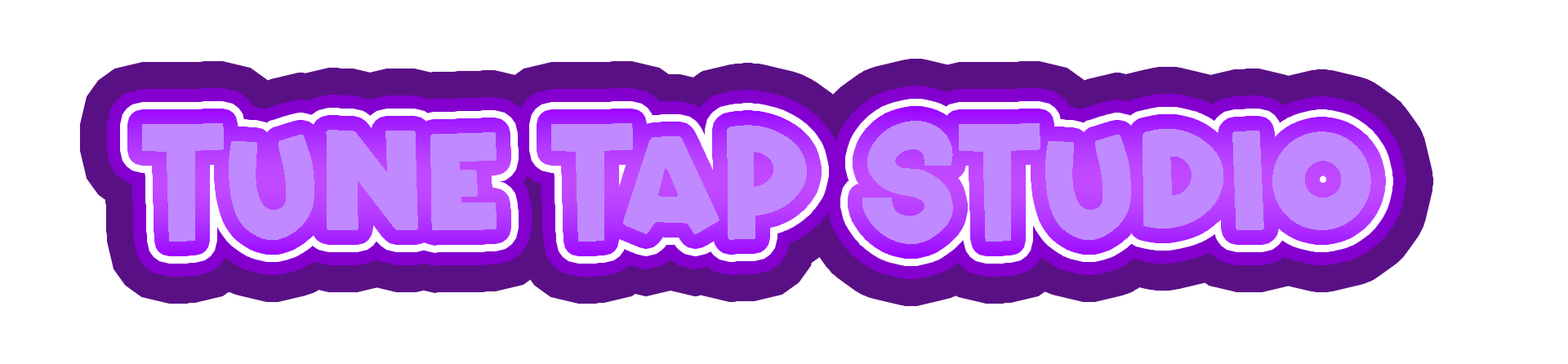
<style>
.page{position:relative;width:1568px;height:364px;background:#ffffff}
.page>*{position:absolute;margin:0}
.t1{font:154.2px "JusticeStoryRegular";letter-spacing:-0.001em;color:#c089ff}
</style>
<div class="page">
<p class="t1" style="left:142px;top:121px;width:1229px;height:123px">Tune Tap Studio</p>
</div>
